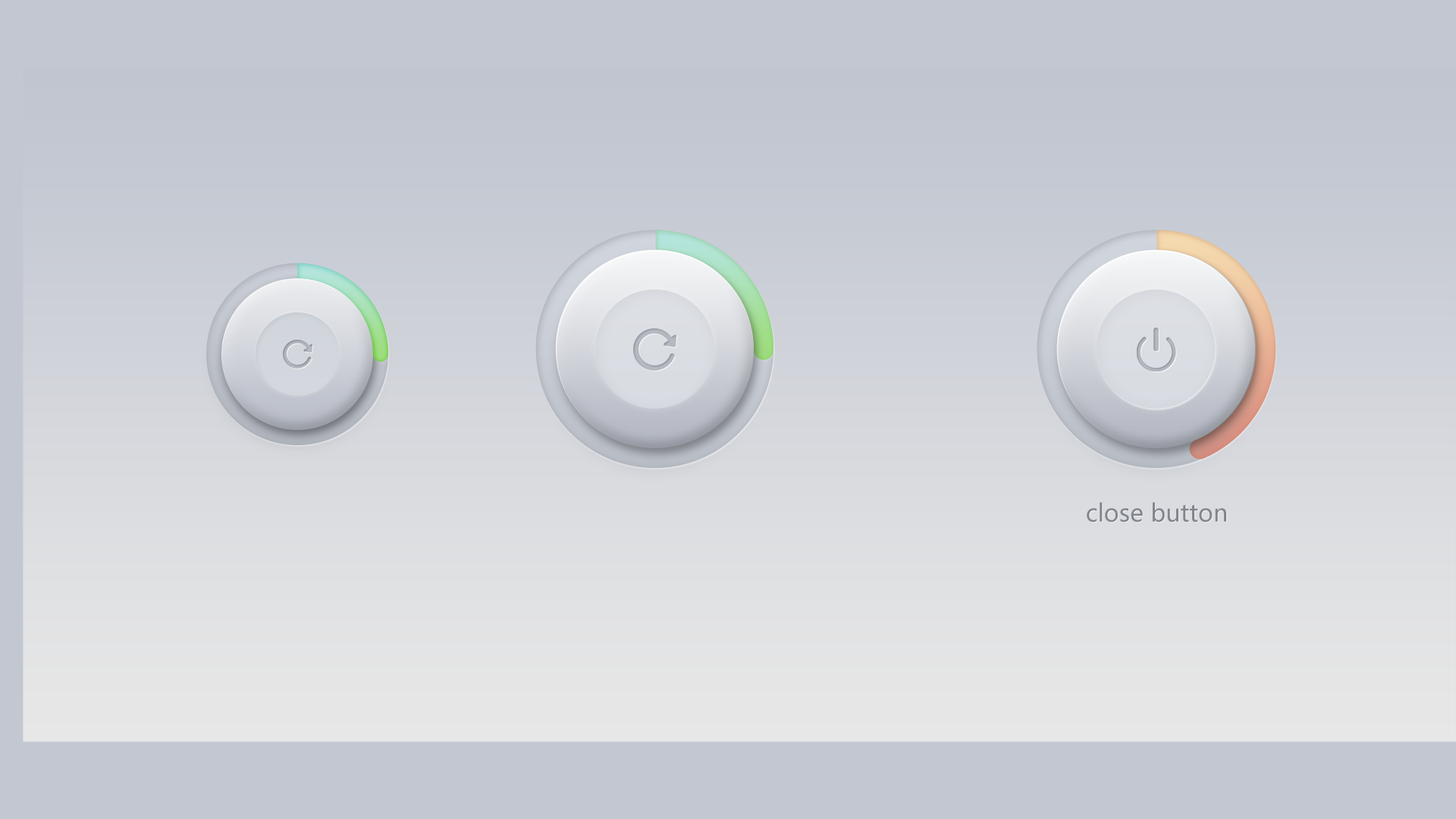
<style>
.page{position:relative;width:1456px;height:819px;background:#c2c7d1}
.page>*{position:absolute;margin:0}
.t1{font:23.8px "MicrosoftYaHei";color:#81858e}
</style>
<div class="page">
<p class="t1" style="left:1087px;top:502px;width:139px;height:20px">close button</p>
</div>
